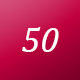
<style>
.page{position:relative;width:80px;height:80px}
.page>*{position:absolute;margin:0}
.t1{font:36px "Cambria-Italic";color:#ffffff}
</style>
<div class="page">
<p class="t1" style="left:22px;top:27px;width:37px;height:25px">50</p>
</div>
